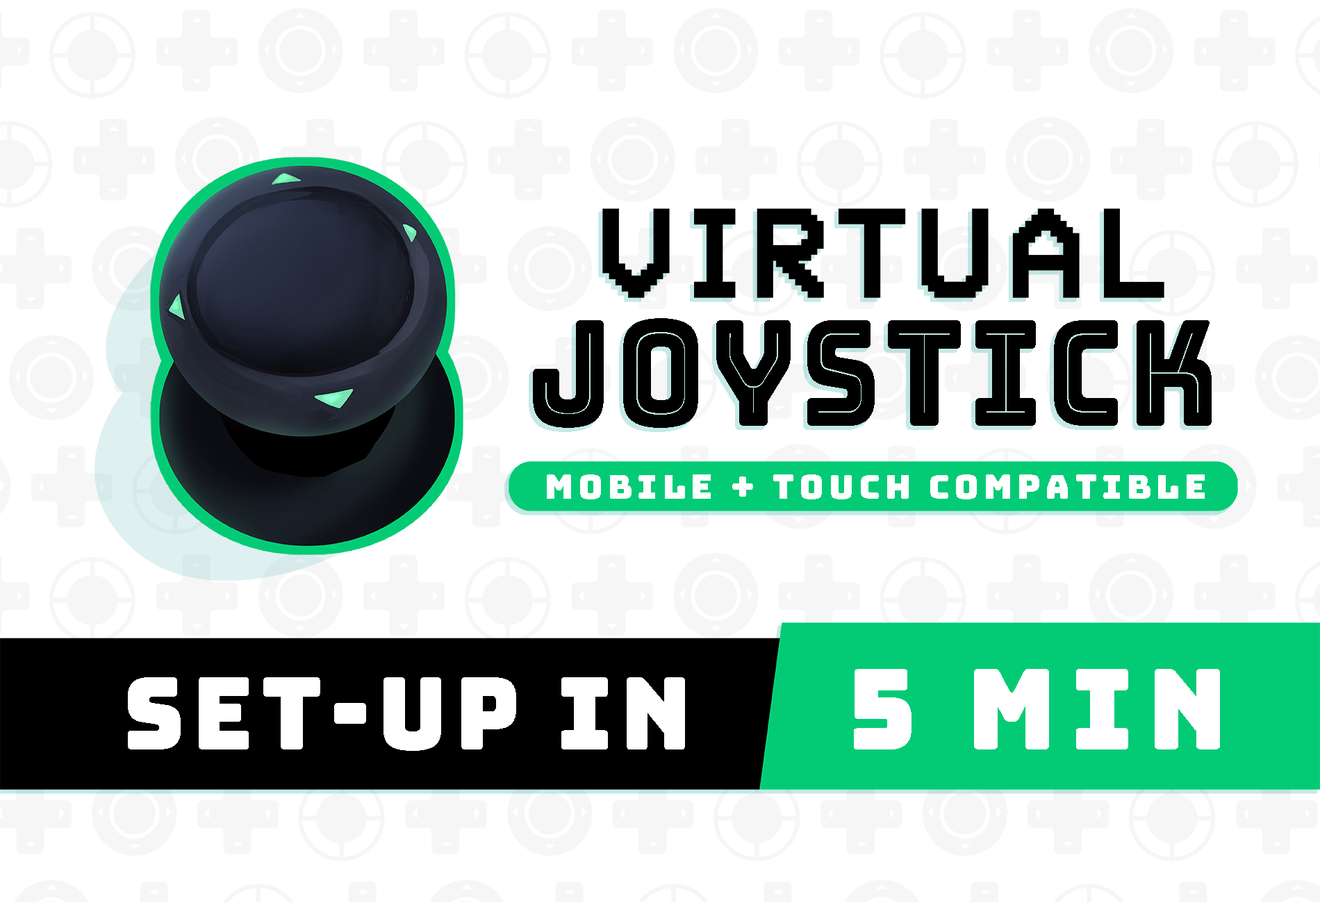
<style>
.page{position:relative;width:1320px;height:903px;background:#ffffff}
.page>*{position:absolute;margin:0}
.t1{font:146.6px "Bungee-Inline";letter-spacing:0.04em;color:#000000;scale:0.83 1}
.t2{font:33.4px "Bungee-Regular";letter-spacing:0.138em;color:#ffffff}
.t3{font:100.3px "Bungee-Regular";letter-spacing:0.08em;color:#ffffff;scale:0.94 1}
.t4{font:112.2px "Bungee-Regular";letter-spacing:0.13em;color:#ffffff;scale:0.94 1}
</style>
<div class="page">
<p class="t1" style="left:533px;top:318px;width:679px;height:110px">joystick</p>
<p class="t2" style="left:547px;top:475px;width:658px;height:25px">MOBILE + TOUCH COMPATIBLE</p>
<p class="t3" style="left:128px;top:677px;width:557px;height:74px">set-up in</p>
<p class="t4" style="left:854px;top:669px;width:366px;height:81px">5 min</p>
</div>
